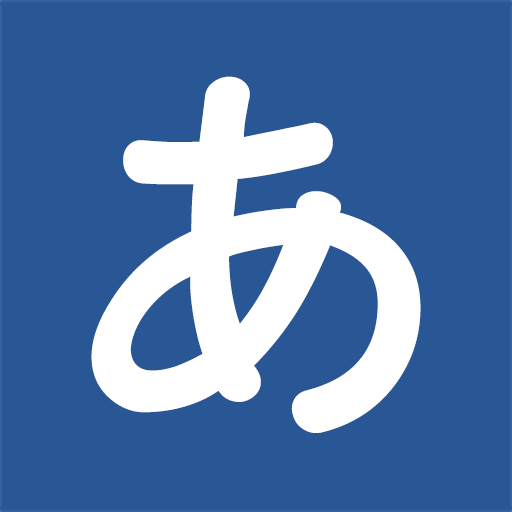
<style>
.page{position:relative;width:512px;height:512px;background:#295795}
.page>*{position:absolute;margin:0}
.t1{font:462.2px "HYgsrB";color:#ffffff}
</style>
<div class="page">
<p class="t1" style="left:91px;top:76px;width:330px;height:357px">あ</p>
</div>
